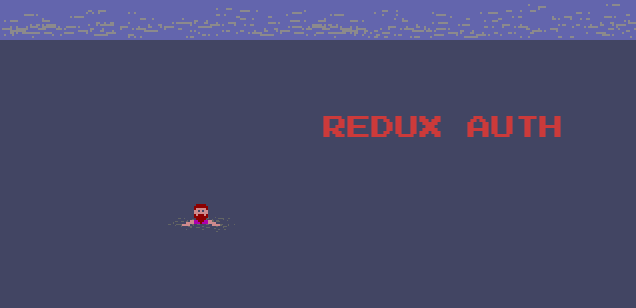
<style>
.page{position:relative;width:636px;height:308px;background:#424563}
.page>*{position:absolute;margin:0}
.t1{font:24px "PressStartK";color:#cc3a3a}
</style>
<div class="page">
<p class="t1" style="left:323px;top:116px;width:238px;height:21px">REDUX AUTH</p>
</div>
